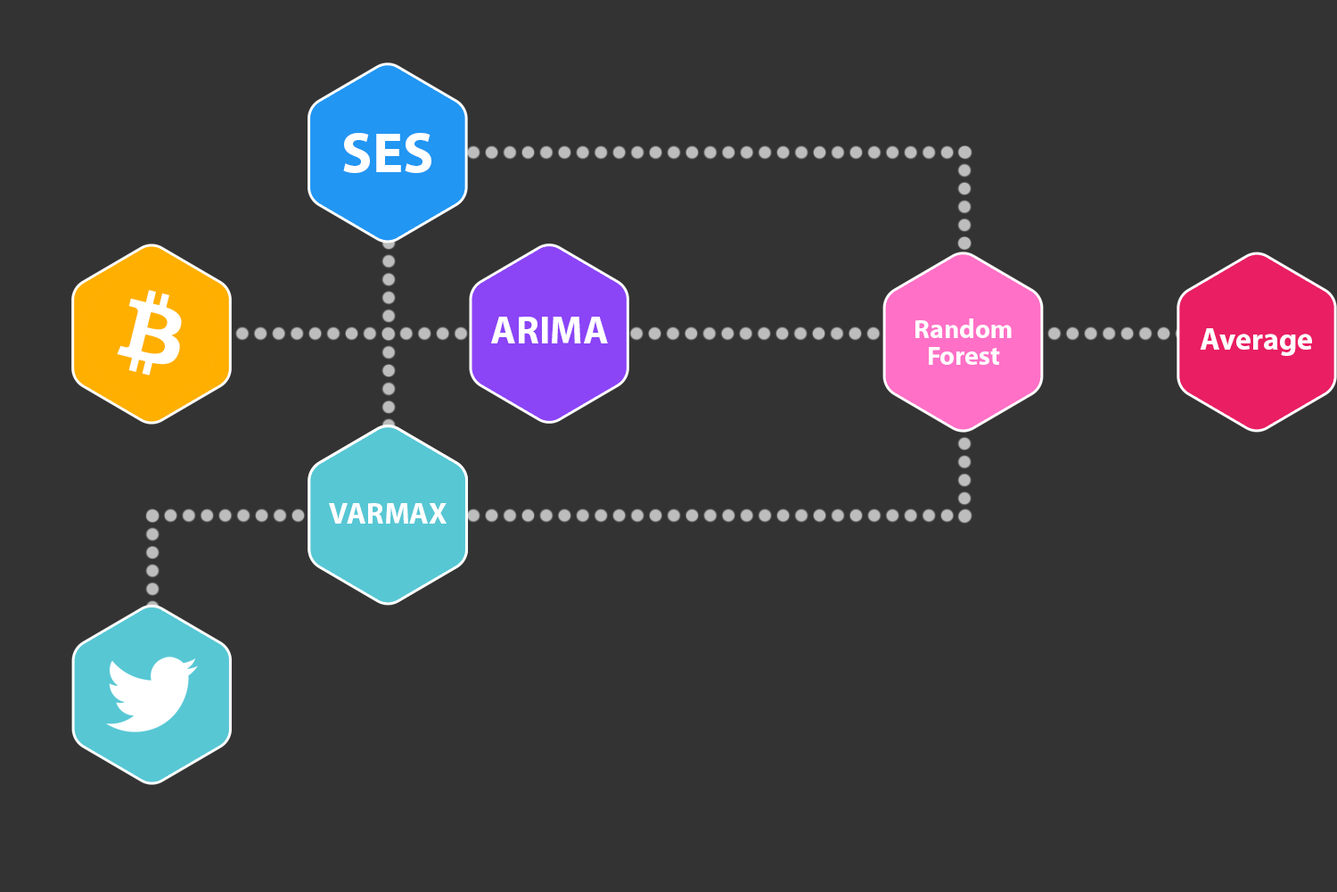
<style>
.page{position:relative;width:1337px;height:892px;background:#333333}
.page>*{position:absolute;margin:0}
.t1{font:79.8px "MyriadArabic-Bold";color:#ffffff}
.t2{font:54.3px "MyriadArabic-Bold";color:#ffffff}
.t3{font:36.9px/27.1px "MyriadArabic-Bold";color:#ffffff}
.t4{font:43.2px "MyriadArabic-Bold";color:#ffffff}
.t5{font:42.1px "MyriadArabic-Bold";color:#ffffff}
</style>
<div class="page">
<p class="t1" style="left:343px;top:133px;width:89px;height:40px">SES</p>
<p class="t2" style="left:491px;top:317px;width:117px;height:26px">ARIMA</p>
<p class="t3" style="left:916px;top:318px;width:96px;height:47px;text-align:center">Random<br>Forest</p>
<p class="t4" style="left:1200px;top:328px;width:112px;height:28px">Average</p>
<p class="t5" style="left:329px;top:503px;width:118px;height:20px">VARMAX</p>
</div>
